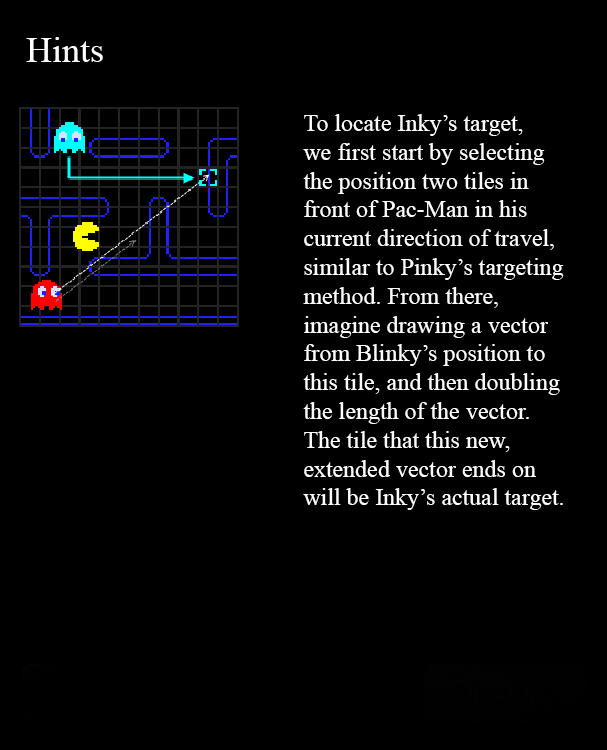
<style>
.page{position:relative;width:607px;height:750px;background:#000000}
.page>*{position:absolute;margin:0}
.t1{font:24px "TimesNewRomanPSMT";color:#ffffff}
</style>
<div class="page">
<p class="t1" style="left:303px;top:114px;width:261px;height:396px">To locate Inky’s target,<br>we first start by selecting<br>the position two tiles in<br>front of Pac-Man in his<br>current direction of travel,<br>similar to Pinky’s targeting<br>method. From there,<br>imagine drawing a vector<br>from Blinky’s position to<br>this tile, and then doubling<br>the length of the vector.<br>The tile that this new,<br>extended vector ends on<br>will be Inky’s actual target.</p>
</div>
